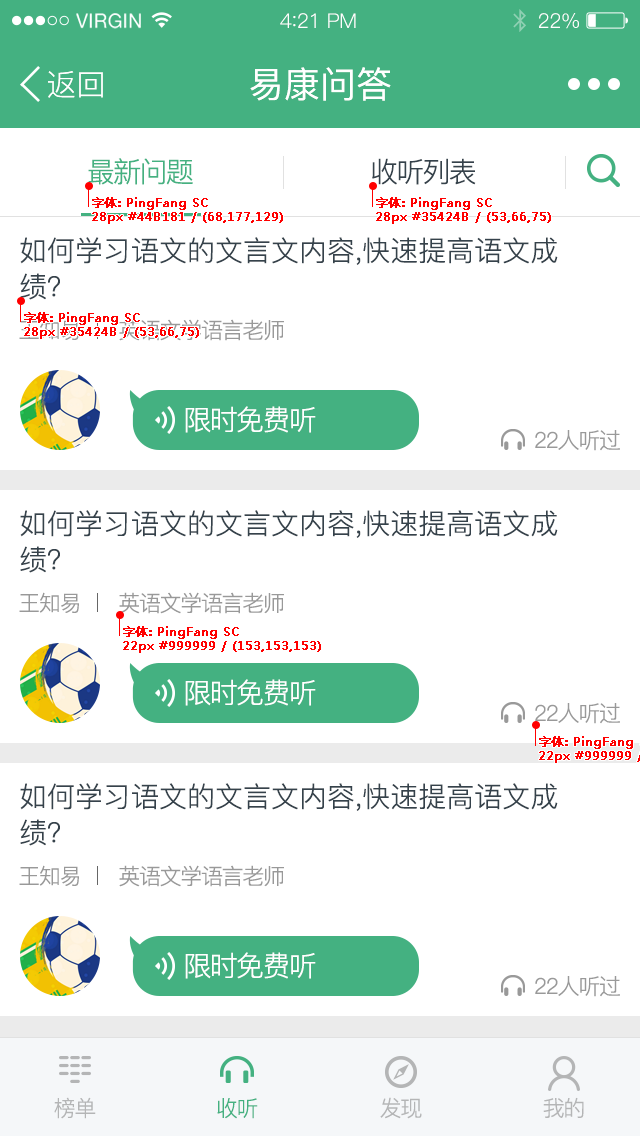
<style>
.page{position:relative;width:640px;height:1136px;background:#ffffff}
.page>*{position:absolute;margin:0}
.t1{font:19.6px "HelveticaNeue";letter-spacing:0.02em;color:#ffffff}
.t2{font:20.4px "PingFang-SC-Regular";letter-spacing:-0.02em;color:#ffffff}
.t3{font:22.1px "PingFang-SC-Regular";letter-spacing:-0.02em;color:#ffffff}
.t4{font:30px "PingFang-SC-Regular";color:#ffffff}
.t5{font:36px "PingFang-SC-Medium";color:#ffffff}
.t6{font:28px "PingFang-SC-Regular";letter-spacing:-0.06em;color:#44b181}
.t7{font:28px "PingFang-SC-Regular";letter-spacing:-0.06em;color:#35424b}
.t8{font:12px "MicrosoftYaHei";color:#ff0000;font-weight:bold}
.t9{font:28px/36px "PingFang-SC-Regular";color:#35424b}
.t10{font:22px "PingFang-SC-Regular";letter-spacing:-0.06em}
.t11{font:22px "PingFang-SC-Regular";letter-spacing:-0.06em;color:#999999}
.t12{font:28px "PingFang-SC-Regular";letter-spacing:-0.06em;color:#ffffff}
.t13{font:22px "PingFang-SC-Regular";letter-spacing:-0.06em;color:#b4b5b6}
.t14{font:22px "PingFang-SC-Regular";letter-spacing:-0.06em;color:#44b181}
</style>
<div class="page">
<p class="t1" style="left:76px;top:13px;width:65px;height:16px">VIRGIN</p>
<p class="t2" style="left:280px;top:13px;width:76px;height:15px">4<span class="t3">:</span>21 PM</p>
<p class="t2" style="left:539px;top:13px;width:40px;height:16px">22%</p>
<p class="t4" style="left:48px;top:71px;width:55px;height:27px">返回</p>
<p class="t5" style="left:250px;top:67px;width:141px;height:34px">易康问答</p>
<p class="t6" style="left:88px;top:158px;width:105px;height:27px">最新问题</p>
<p class="t7" style="left:372px;top:158px;width:104px;height:27px">收听列表</p>
<p class="t8" style="left:92px;top:197px;width:191px;height:27px">字体: PingFang SC<br>28px #44B181 / (68,177,129)</p>
<p class="t8" style="left:376px;top:197px;width:175px;height:27px">字体: PingFang SC<br>28px #35424B / (53,66,75)</p>
<p class="t9" style="left:20px;top:237px;width:538px;height:63px">如何学习语文的文言文内容,快速提高语文成<br>绩？</p>
<p class="t8" style="left:24px;top:312px;width:175px;height:27px">字体: PingFang SC<br>28px #35424B / (53,66,75)</p>
<p class="t10" style="left:19px;top:319px;width:60px;height:21px">王知易</p>
<p class="t11" style="left:119px;top:319px;width:165px;height:22px">英语文学语言老师</p>
<p class="t12" style="left:185px;top:406px;width:131px;height:27px">限时免费听</p>
<p class="t11" style="left:535px;top:430px;width:85px;height:21px">22人听过</p>
<p class="t9" style="left:20px;top:510px;width:538px;height:63px">如何学习语文的文言文内容,快速提高语文成<br>绩？</p>
<p class="t11" style="left:19px;top:592px;width:60px;height:21px">王知易</p>
<p class="t11" style="left:119px;top:592px;width:165px;height:22px">英语文学语言老师</p>
<p class="t8" style="left:123px;top:626px;width:198px;height:27px">字体: PingFang SC<br>22px #999999 / (153,153,153)</p>
<p class="t12" style="left:185px;top:679px;width:131px;height:27px">限时免费听</p>
<p class="t11" style="left:535px;top:703px;width:85px;height:21px">22人听过</p>
<p class="t9" style="left:20px;top:783px;width:538px;height:63px">如何学习语文的文言文内容,快速提高语文成<br>绩？</p>
<p class="t11" style="left:19px;top:865px;width:60px;height:21px">王知易</p>
<p class="t11" style="left:119px;top:865px;width:165px;height:22px">英语文学语言老师</p>
<p class="t12" style="left:185px;top:952px;width:131px;height:27px">限时免费听</p>
<p class="t11" style="left:535px;top:976px;width:85px;height:21px">22人听过</p>
<p class="t13" style="left:54px;top:1097px;width:42px;height:22px">榜单</p>
<p class="t13" style="left:380px;top:1097px;width:42px;height:22px">发现</p>
<p class="t13" style="left:543px;top:1097px;width:41px;height:21px">我的</p>
<p class="t14" style="left:217px;top:1098px;width:41px;height:21px">收听</p>
</div>
